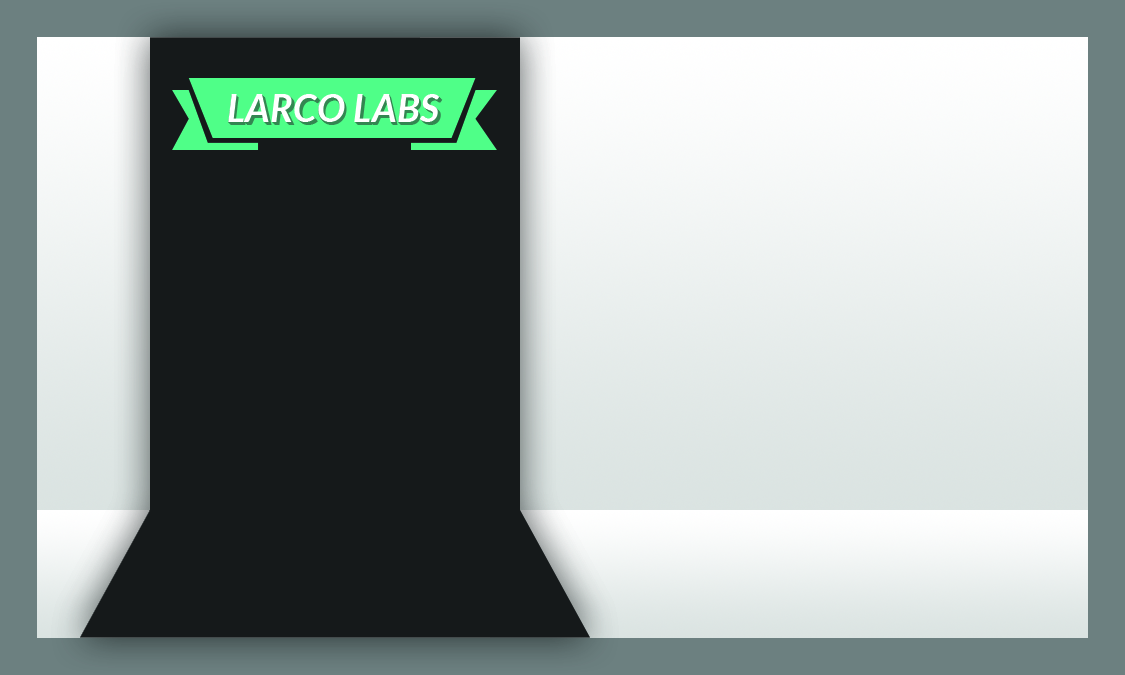
<style>
.page{position:relative;width:1125px;height:675px;background:#15191a}
.page>*{position:absolute;margin:0}
.t1{font:38px "Lato-BoldItalic";letter-spacing:0.02em;color:#ffffff}
.t2{font:38px "Lato-BoldItalic";letter-spacing:0.02em}
</style>
<div class="page">
<p class="t1" style="left:228px;top:95px;width:213px;height:28px">LARCO LABS</p>
<p class="t1" style="left:228px;top:94px;width:212px;height:28px">LARCO LABS</p>
<p class="t2" style="left:229px;top:96px;width:213px;height:28px">LARCO LABS</p>
<p class="t2" style="left:230px;top:97px;width:213px;height:28px">LARCO LABS</p>
</div>
